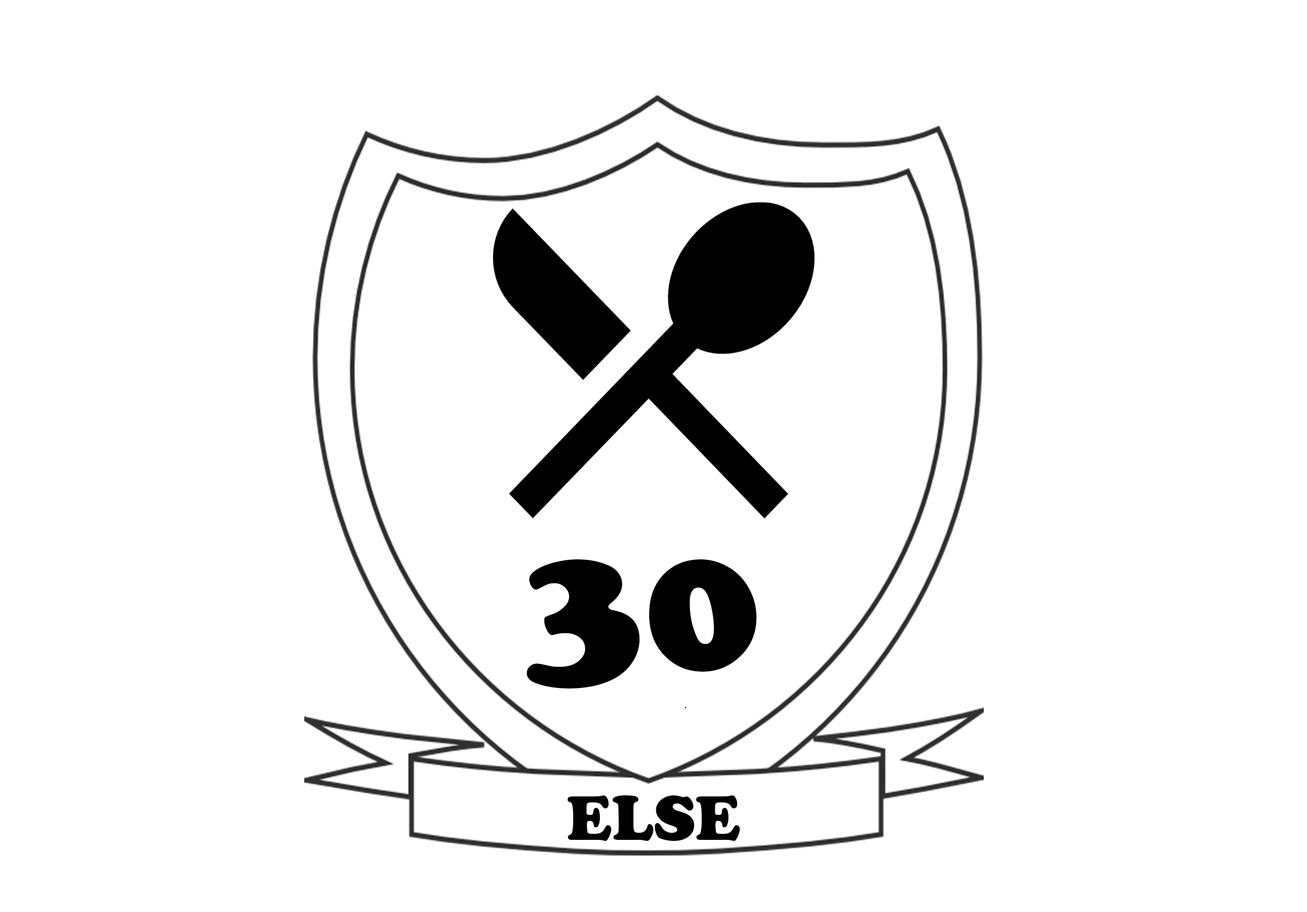
<style>
.page{position:relative;width:1307px;height:912px;background:#ffffff}
.page>*{position:absolute;margin:0}
.t1{font:195.3px "CooperBlack";color:#000000}
.t2{font:65.1px "CooperBlack";color:#000000}
</style>
<div class="page">
<p class="t1" style="left:527px;top:559px;width:230px;height:129px">30</p>
<p class="t2" style="left:567px;top:795px;width:174px;height:46px">ELSE</p>
</div>
